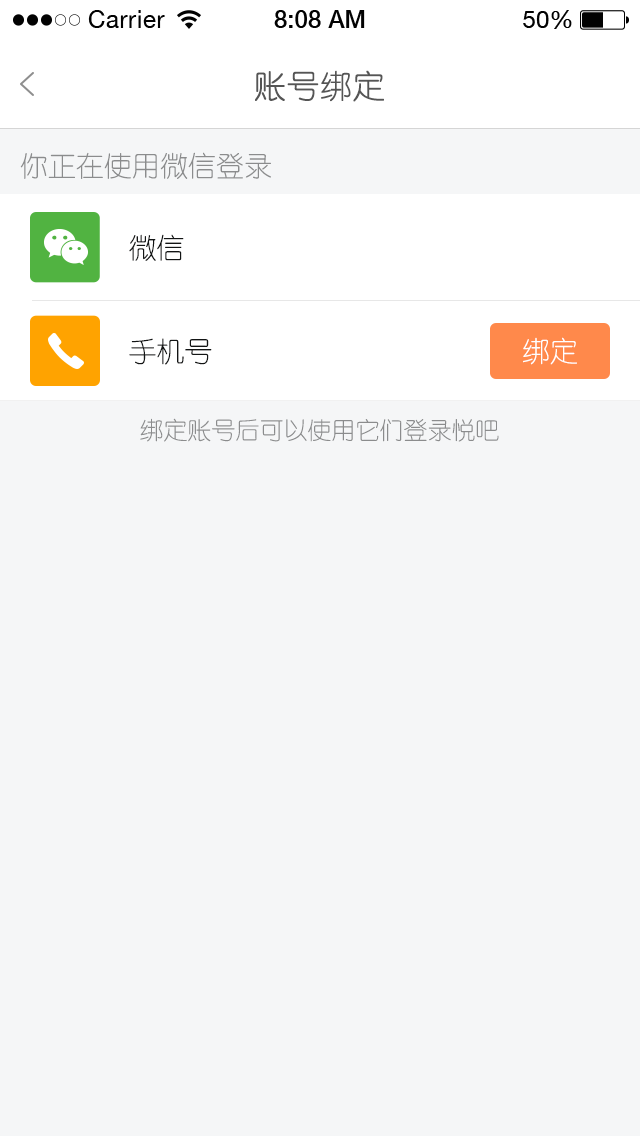
<style>
.page{position:relative;width:640px;height:1136px;background:#f5f6f7}
.page>*{position:absolute;margin:0}
.t1{font:32px "YouYuan";color:#555555;text-transform:uppercase;font-weight:bold}
.t2{font:28px "YouYuan";color:#8b8c8d}
.t3{font:28px "YouYuan";color:#121414}
.t4{font:28px "YouYuan";color:#ffffff;text-transform:uppercase}
.t5{font:24px "YouYuan";color:#8b8c8d}
</style>
<div class="page">
<p class="t1" style="left:255px;top:70px;width:129px;height:32px">账号绑定</p>
<p class="t2" style="left:20px;top:152px;width:251px;height:27px">你正在使用微信登录</p>
<p class="t3" style="left:129px;top:234px;width:55px;height:27px">微信</p>
<p class="t3" style="left:129px;top:338px;width:83px;height:27px">手机号</p>
<p class="t4" style="left:523px;top:337px;width:54px;height:28px">绑定</p>
<p class="t5" style="left:140px;top:418px;width:359px;height:24px">绑定账号后可以使用它们登录悦吧</p>
</div>
